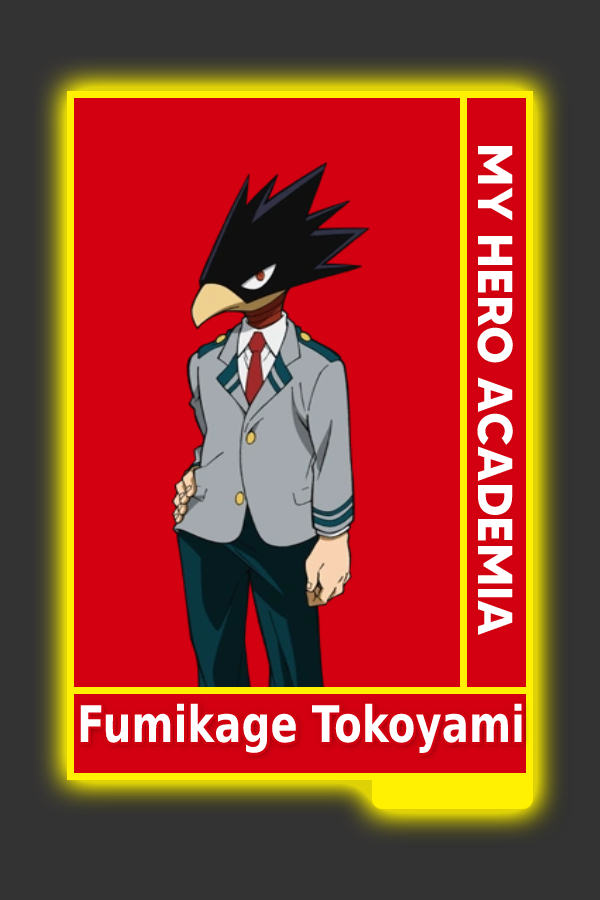
<style>
.page{position:relative;width:600px;height:900px;background:#d20010}
.page>*{position:absolute;margin:0}
.t1{font:48.8px "MADETOMMY-Bold";color:#ffffff}
.t2{font:50.5px "MADETOMMY-Bold";color:#ffffff;scale:0.8 1}
</style>
<div class="page">
<p class="t1" style="left:477px;top:146px;width:36px;height:489px;rotate:90deg">MY HERO ACADEMIA</p>
<p class="t2" style="left:80px;top:703px;width:442px;height:50px">Fumikage Tokoyami</p>
</div>
